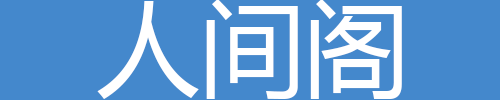
<style>
.page{position:relative;width:500px;height:100px;background:#4488cc}
.page>*{position:absolute;margin:0}
.t1{font:104.2px "MicrosoftYaHei";color:#ffffff}
</style>
<div class="page">
<p class="t1" style="left:97px;top:0px;width:305px;height:99px">人间阁</p>
</div>
